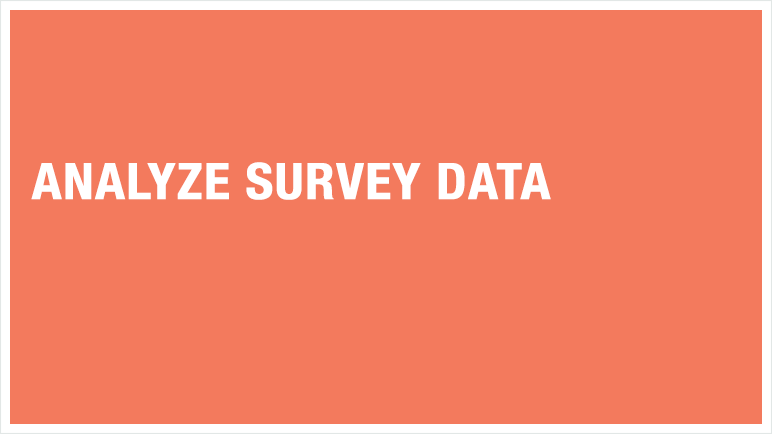
<style>
.page{position:relative;width:772px;height:434px;background:#f37a5d}
.page>*{position:absolute;margin:0}
.t1{font:50px "HelveticaNeue-CondensedBold";color:#ffffff;font-weight:bold;scale:1.07 1}
</style>
<div class="page">
<p class="t1" style="left:31px;top:162px;width:520px;height:38px">ANALYZE SURVEY DATA</p>
</div>
